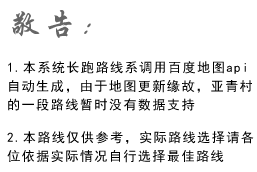
<style>
.page{position:relative;width:257px;height:172px;background:#ffffff}
.page>*{position:absolute;margin:0}
.t1{font:32px "STXingkai";letter-spacing:0.09em;color:#666666}
.t2{font:13.3px/18.7px "SimHei";letter-spacing:0.09em;color:#000000}
</style>
<div class="page">
<p class="t1" style="left:12px;top:10px;width:79px;height:28px">敬告：</p>
<p class="t2" style="left:8px;top:61px;width:244px;height:50px">1.本系统长跑路线系调用百度地图api<br>自动生成，由于地图更新缘故，亚青村<br>的一段路线暂时没有数据支持</p>
<p class="t2" style="left:7px;top:131px;width:247px;height:32px">2.本路线仅供参考，实际路线选择请各<br>位依据实际情况自行选择最佳路线</p>
</div>
